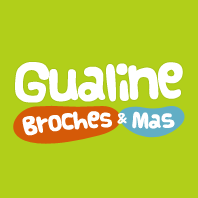
<style>
.page{position:relative;width:198px;height:198px;background:#b1cf1a}
.page>*{position:absolute;margin:0}
.t1{font:40.3px "Vanilla";letter-spacing:-0.08em;color:#ffffff}
.t2{font:19px "Vanilla";letter-spacing:-0.04em;color:#ffffff}
.t3{font:16.6px "Vanilla";letter-spacing:-0.04em;color:#ffffff}
.t4{font:12.7px "Vanilla";letter-spacing:-0.04em;color:#ffffff}
.t5{font:16.5px "Vanilla";letter-spacing:-0.04em;color:#ffffff}
</style>
<div class="page">
<p class="t1" style="left:15px;top:62px;width:168px;height:41px;rotate:-1deg">Gualine</p>
<p class="t2" style="left:22px;top:111px;width:90px;height:25px;rotate:-5deg">Broche<span class="t3">s</span></p>
<p class="t4" style="left:117px;top:113px;width:10px;height:11px;rotate:-3deg"><span class="t5"> </span>&amp;</p>
<p class="t5" style="left:132px;top:111px;width:43px;height:18px;rotate:-1deg">Mas</p>
</div>
